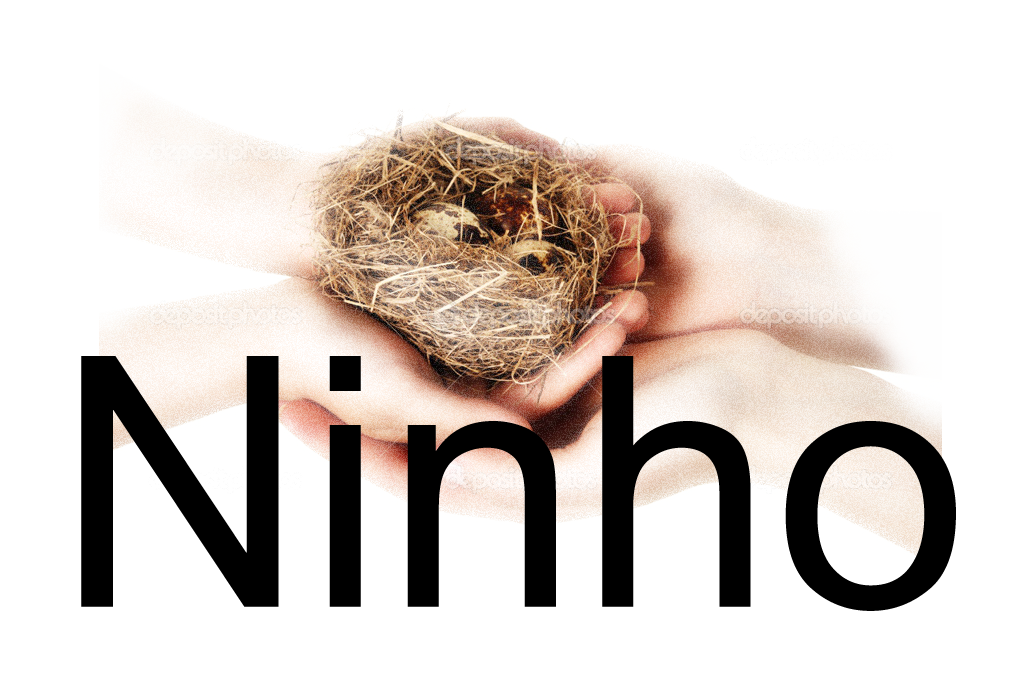
<style>
.page{position:relative;width:1024px;height:682px;background:#ffffff}
.page>*{position:absolute;margin:0}
.t1{font:350px "ArialUnicodeMS";color:#000000}
</style>
<div class="page">
<p class="t1" style="left:81px;top:356px;width:875px;height:255px">Ninho</p>
</div>
